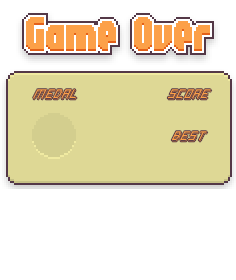
<style>
.page{position:relative;width:236px;height:280px;background:#ffffff}
.page>*{position:absolute;margin:0}
.t1{font:10px "Italic-Bricks";color:#fca048}
</style>
<div class="page">
<p class="t1" style="left:33px;top:89px;width:44px;height:11px">MEDAL</p>
<p class="t1" style="left:167px;top:89px;width:45px;height:11px">SCORE</p>
<p class="t1" style="left:171px;top:131px;width:37px;height:11px">BEST</p>
</div>
